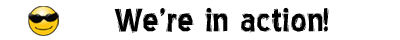
<style>
.page{position:relative;width:400px;height:40px;background:#ffffff}
.page>*{position:absolute;margin:0}
.t1{font:39.2px "BlueHighwayLinocut";color:#000000}
</style>
<div class="page">
<p class="t1" style="left:114px;top:7px;width:215px;height:26px">We’re in action!</p>
</div>
